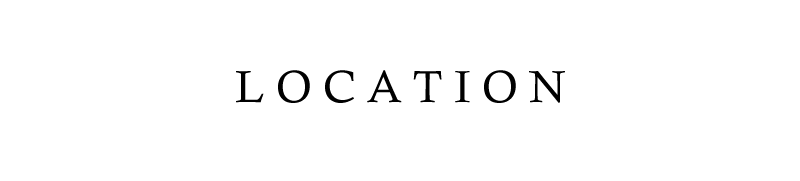
<style>
.page{position:relative;width:800px;height:181px;background:#ffffff}
.page>*{position:absolute;margin:0}
.t1{font:45px "CalistoMT";color:#000000}
</style>
<div class="page">
<p class="t1" style="left:236px;top:70px;width:329px;height:33px">L O C A T I O N</p>
</div>
